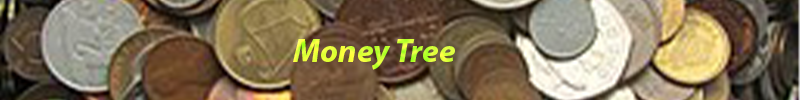
<style>
.page{position:relative;width:800px;height:100px}
.page>*{position:absolute;margin:0}
.t1{font:33px "MyriadPro-BoldIt"}
</style>
<div class="page">
<p class="t1" style="left:293px;top:39px;width:162px;height:31px">Money Tree</p>
</div>
